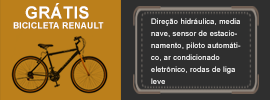
<style>
.page{position:relative;width:270px;height:100px;background:#2f2f2f}
.page>*{position:absolute;margin:0}
.t1{font:16.6px "Arial-BoldMT";letter-spacing:0.022em;color:#ffffff}
.t2{font:8.6px "Arial-BoldMT";letter-spacing:0.022em;color:#ffffff}
.t3{font:7.6px/12px "ArialMT";letter-spacing:0.022em;color:#ffffff}
</style>
<div class="page">
<p class="t1" style="left:25px;top:3px;width:64px;height:16px">GRÁTIS</p>
<p class="t2" style="left:13px;top:22px;width:91px;height:7px">BICICLETA RENAULT</p>
<p class="t3" style="left:151px;top:18px;width:90px;height:66px">Direção hidráulica, media nave, sensor de estacionamento, piloto automático, ar condicionado eletrônico, rodas de liga leve</p>
</div>
